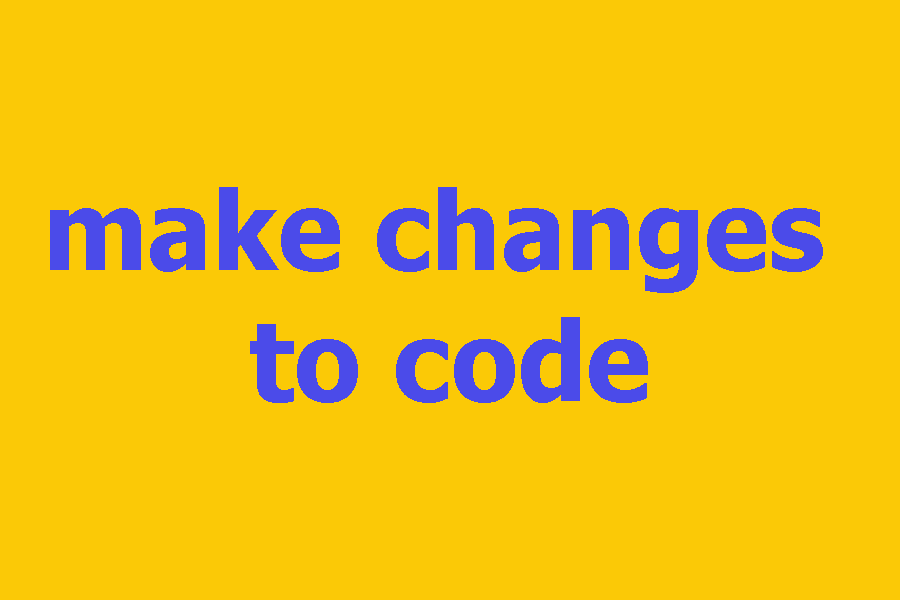
<style>
.page{position:relative;width:900px;height:600px;background:#fbc906}
.page>*{position:absolute;margin:0}
.t1{font:108.8px "Tahoma-Bold";color:#4b4be9}
</style>
<div class="page">
<p class="t1" style="left:50px;top:187px;width:773px;height:216px;text-align:center">make changes <br>to code</p>
</div>
